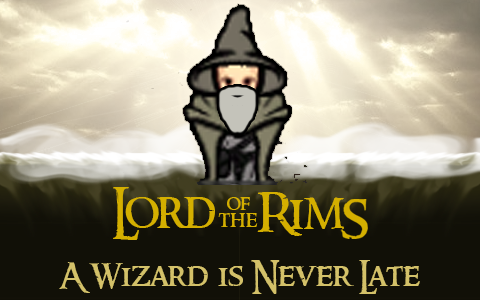
<style>
.page{position:relative;width:480px;height:300px}
.page>*{position:absolute;margin:0}
.t1{font:49.9px "RingbearerMedium";color:#d4af00}
.t2{font:20.7px "RingbearerMedium";color:#d4af00}
.t3{font:22.8px "RingbearerMedium";color:#d4af00}
.t4{font:32.5px "RingbearerMedium";color:#d3c169}
</style>
<div class="page">
<p class="t1" style="left:113px;top:187px;width:102px;height:53px">Lord</p>
<p class="t2" style="left:227px;top:197px;width:23px;height:13px">of</p>
<p class="t1" style="left:257px;top:192px;width:87px;height:44px">Rim</p>
<p class="t3" style="left:218px;top:213px;width:40px;height:14px">the</p>
<p class="t4" style="left:59px;top:260px;width:361px;height:34px">A Wizard is Never Late</p>
</div>
